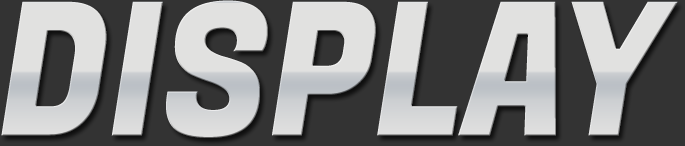
<style>
.page{position:relative;width:685px;height:146px;background:#333333}
.page>*{position:absolute;margin:0}
.t1{font:185.2px "FugazOne-Regular";color:#dfdfdf;scale:0.89 1}
</style>
<div class="page">
<p class="t1" style="left:1px;top:0px;width:677px;height:138px">DISPLAY</p>
</div>
